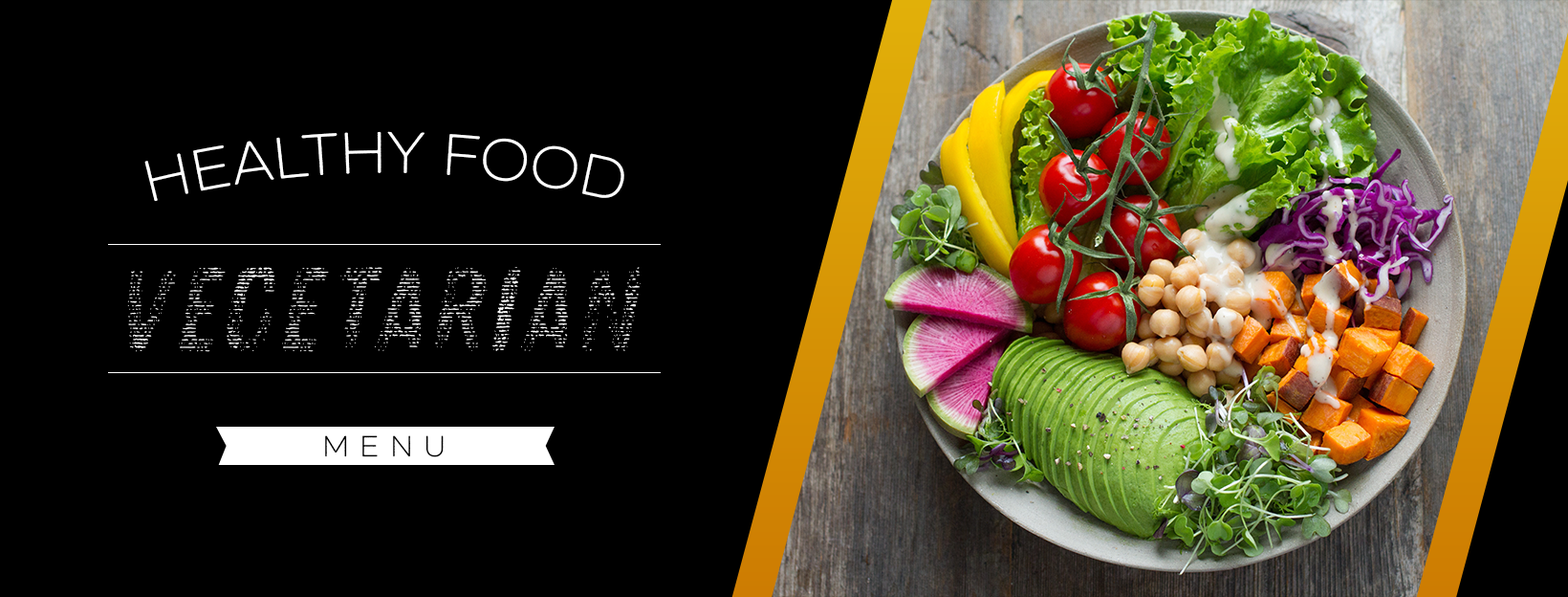
<style>
.page{position:relative;width:1568px;height:597px;background:#000000}
.page>*{position:absolute;margin:0}
.t1{font:58.3px "ZingSansRustLDemo-Base";color:#ffffff}
.t2{font:124.2px "ZingRustLH1Demo-Fill";color:#ffffff}
.t3{font:29.2px "ZingSansRustLDemo-Base";letter-spacing:0.36em;color:#000000}
</style>
<div class="page">
<p class="t1" style="left:144px;top:131px;width:480px;height:71px">Healthy food</p>
<p class="t2" style="left:127px;top:267px;width:515px;height:85px">Vegetarian</p>
<p class="t3" style="left:325px;top:435px;width:119px;height:22px">menu</p>
</div>
